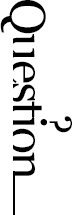
<style>
.page{position:relative;width:72px;height:215px;background:#ffffff}
.page>*{position:absolute;margin:0}
.t1{font:50px "Georgia";letter-spacing:-0.05em;color:#000000}
.t2{font:42.5px "Georgia";letter-spacing:-0.05em;color:#000000}
</style>
<div class="page">
<p class="t1" style="left:0px;top:0px;width:47px;height:180px;rotate:90deg">Question</p>
<p class="t2" style="left:41px;top:116px;width:31px;height:17px;rotate:90deg">?</p>
</div>
